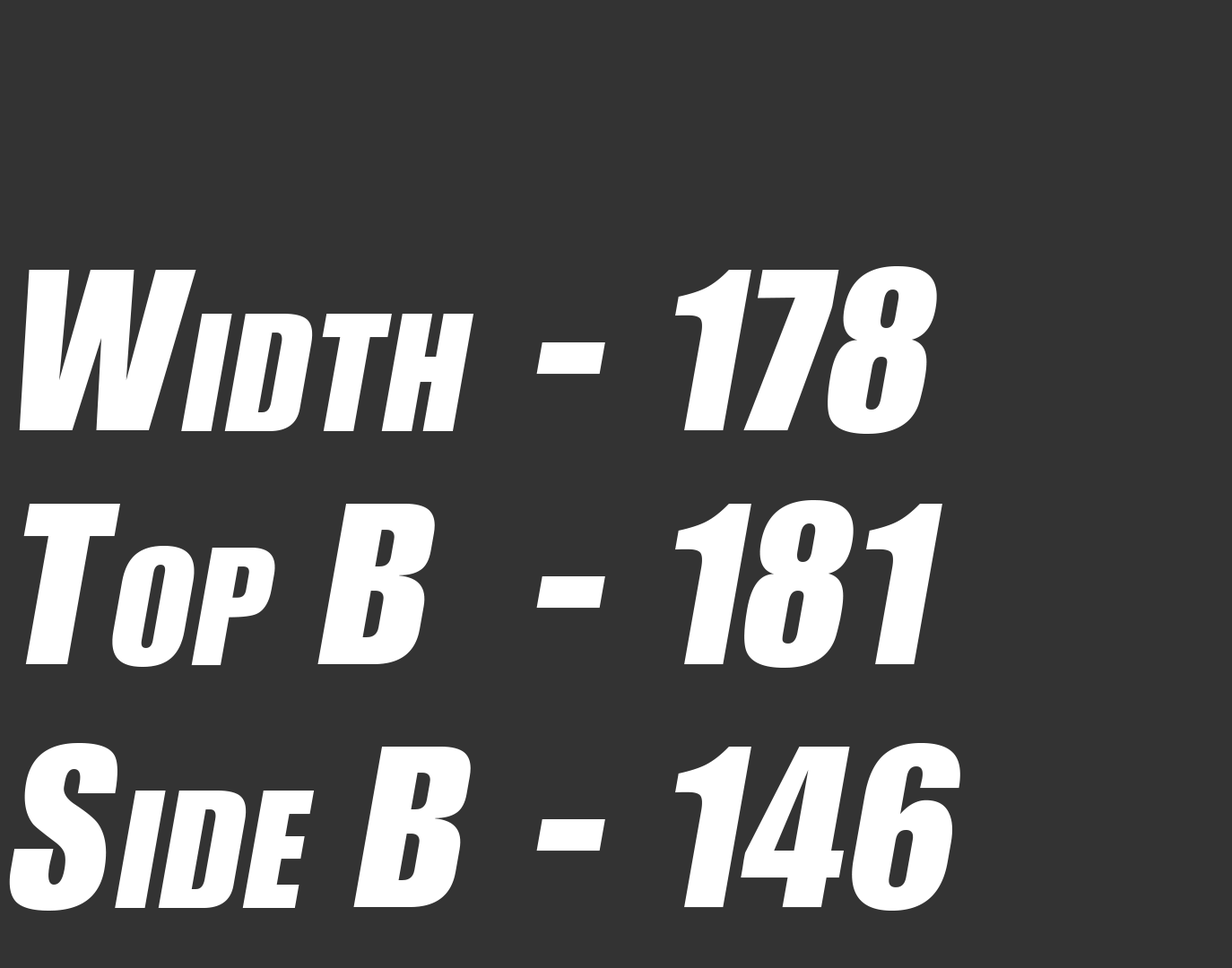
<style>
.page{position:relative;width:1232px;height:968px;background:#333333}
.page>*{position:absolute;margin:0}
.t1{font:161.9px "Genuine";letter-spacing:0.03em;color:#ffffff;font-style:italic}
.t2{font:224.9px "Genuine";letter-spacing:0.05em;color:#ffffff;font-style:italic}
.t3{font:224.9px "Genuine";color:#ffffff;font-style:italic}
</style>
<div class="page">
<p class="t1" style="left:19px;top:270px;width:455px;height:161px"><span class="t2">W</span>IDTH</p>
<p class="t3" style="left:536px;top:266px;width:401px;height:168px">- 178</p>
<p class="t1" style="left:23px;top:504px;width:412px;height:163px"><span class="t2">T</span>OP <span class="t2">B</span></p>
<p class="t3" style="left:536px;top:500px;width:406px;height:168px">- 181</p>
<p class="t1" style="left:9px;top:743px;width:462px;height:168px"><span class="t2">S</span>IDE <span class="t2">B</span></p>
<p class="t3" style="left:536px;top:743px;width:424px;height:168px">- 146</p>
</div>
